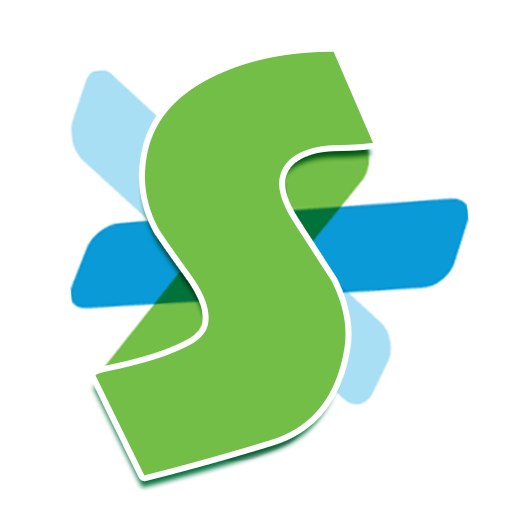
<style>
.page{position:relative;width:512px;height:512px;background:#ffffff}
.page>*{position:absolute;margin:0}
.t1{font:537px "THEMINION";color:#73be46}
</style>
<div class="page">
<p class="t1" style="left:95px;top:51px;width:278px;height:425px">S</p>
</div>
